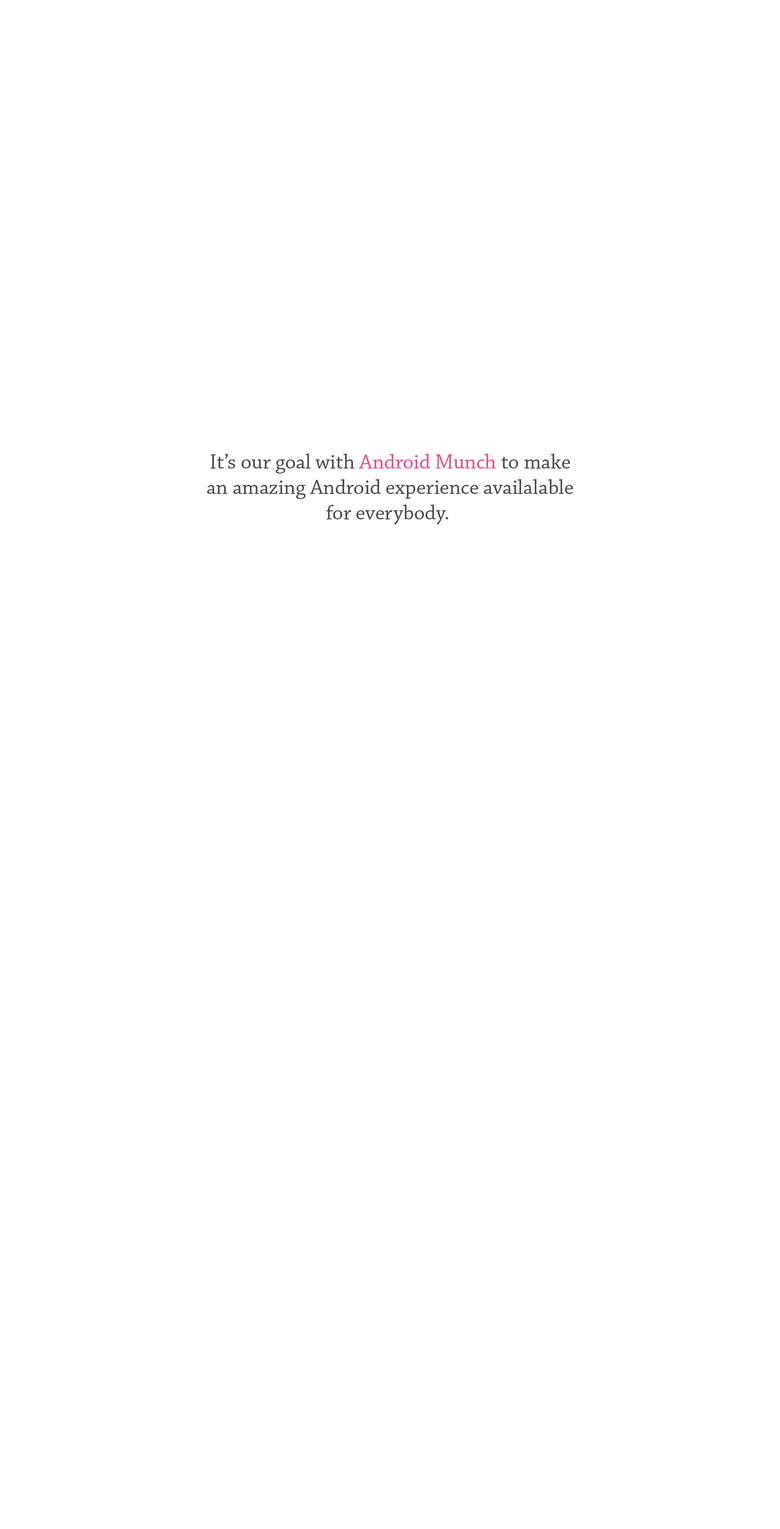
<style>
.page{position:relative;width:780px;height:1529px;background:#ffffff}
.page>*{position:absolute;margin:0}
.t1{font:21.2px "ChaparralPro-Regular";color:#474747}
.t2{font:21.2px "ChaparralPro-Regular";color:#e54b7c}
</style>
<div class="page">
<p class="t1" style="left:207px;top:454px;width:366px;height:70px;text-align:center">It’s our goal with <span class="t2">Android Munch</span> to make<br>an amazing Android experience availalable<br>for everybody.</p>
</div>
